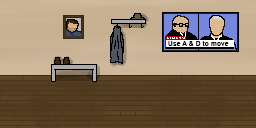
<style>
.page{position:relative;width:256px;height:128px}
.page>*{position:absolute;margin:0}
.t1{font:7px "ArialNarrow-Bold";letter-spacing:0.008em;color:#000000;scale:1.17 1}
</style>
<div class="page">
<p class="t1" style="left:168px;top:41px;width:61px;height:5px">Use A &amp; D to move</p>
</div>
